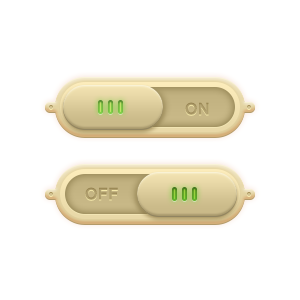
<style>
.page{position:relative;width:300px;height:300px;background:#ffffff}
.page>*{position:absolute;margin:0}
.t1{font:18px "Latha-Bold";color:#b6a675}
</style>
<div class="page">
<p class="t1" style="left:185px;top:102px;width:24px;height:13px">ON</p>
<p class="t1" style="left:85px;top:187px;width:33px;height:13px">OFF</p>
</div>
